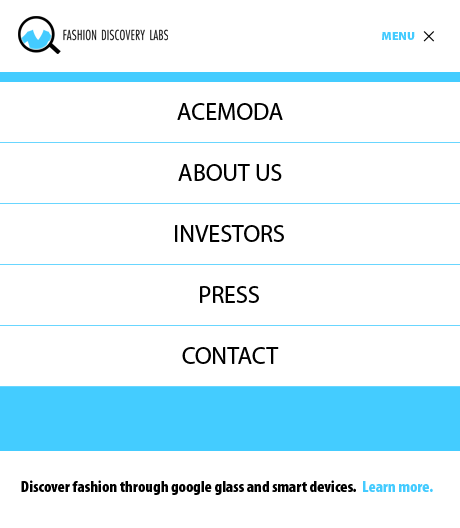
<style>
.page{position:relative;width:460px;height:528px;background:#ffffff}
.page>*{position:absolute;margin:0}
.t1{font:11.9px "MyriadPro-Black";color:#44ccff;text-transform:uppercase}
.t2{font:24px "MyriadPro-Regular";color:#000000;text-transform:uppercase}
.t3{font:16.2px "MyriadPro-BlackCond";color:#000000}
.t4{font:16.2px "MyriadPro-BlackCond";color:#44ccff}
</style>
<div class="page">
<p class="t1" style="left:382px;top:32px;width:33px;height:8px">Menu</p>
<p class="t2" style="left:177px;top:103px;width:106px;height:17px">acemoda</p>
<p class="t2" style="left:178px;top:164px;width:104px;height:17px">about us</p>
<p class="t2" style="left:175px;top:225px;width:109px;height:17px">investors</p>
<p class="t2" style="left:200px;top:286px;width:59px;height:17px">Press</p>
<p class="t2" style="left:182px;top:347px;width:97px;height:17px">contact</p>
<p class="t3" style="left:21px;top:480px;width:412px;height:15px">Discover fashion through google glass and smart devices.  <span class="t4">Learn more.</span></p>
</div>
